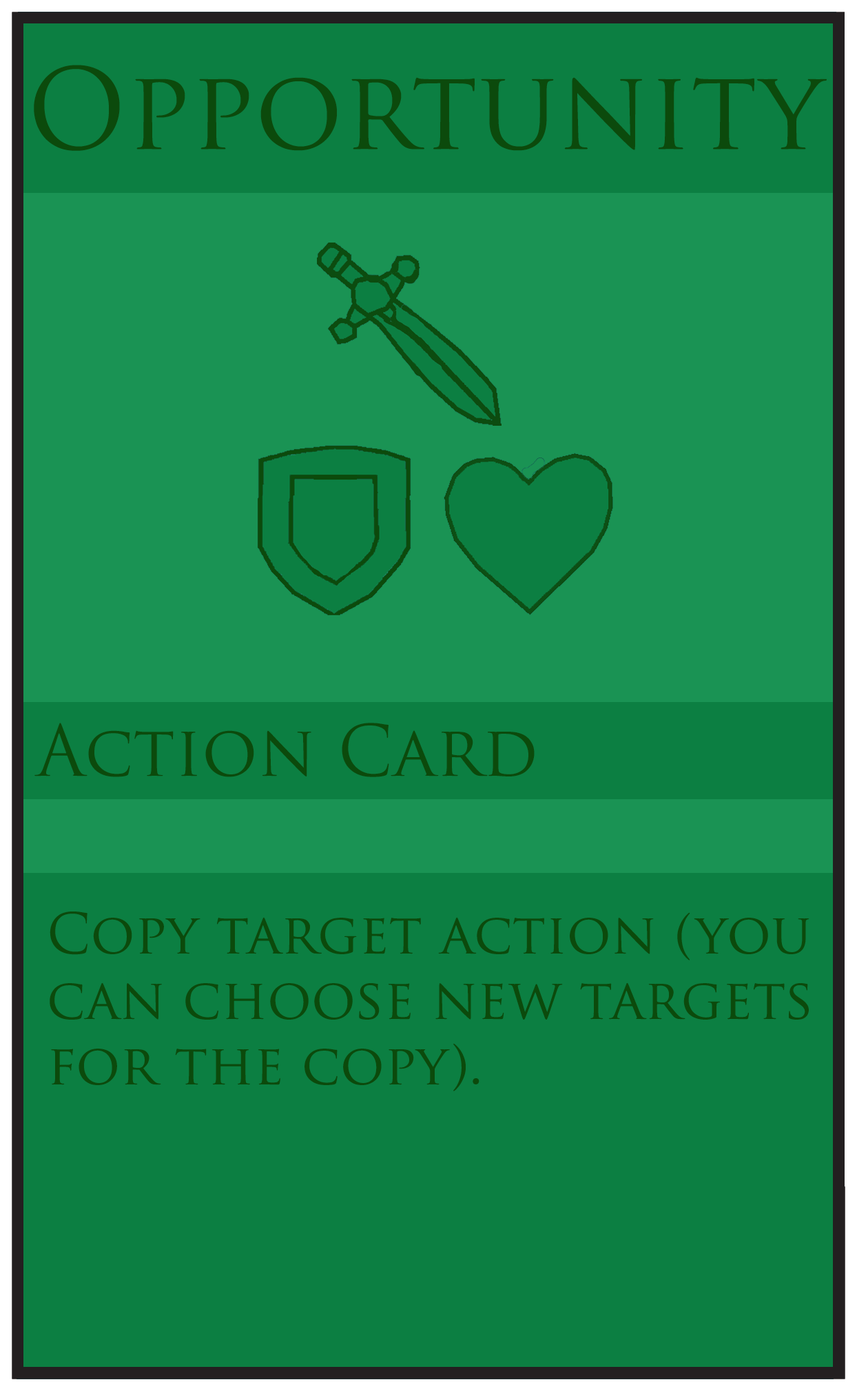
<style>
.page{position:relative;width:857px;height:1391px;background:#0c7f42}
.page>*{position:absolute;margin:0}
.t1{font:109.1px "TrajanPro-Regular";color:#0c4a0c}
.t2{font:68.9px "TrajanPro-Regular";color:#0c4a0c}
.t3{font:54.5px "TrajanPro-Regular";color:#0c4a0c}
</style>
<div class="page">
<p class="t1" style="left:34px;top:65px;width:793px;height:86px">Opportunity</p>
<p class="t2" style="left:34px;top:723px;width:501px;height:54px">Action Card</p>
<p class="t3" style="left:50px;top:912px;width:760px;height:179px">Copy target action (you <br>can choose new targets<br>for the copy).</p>
</div>
